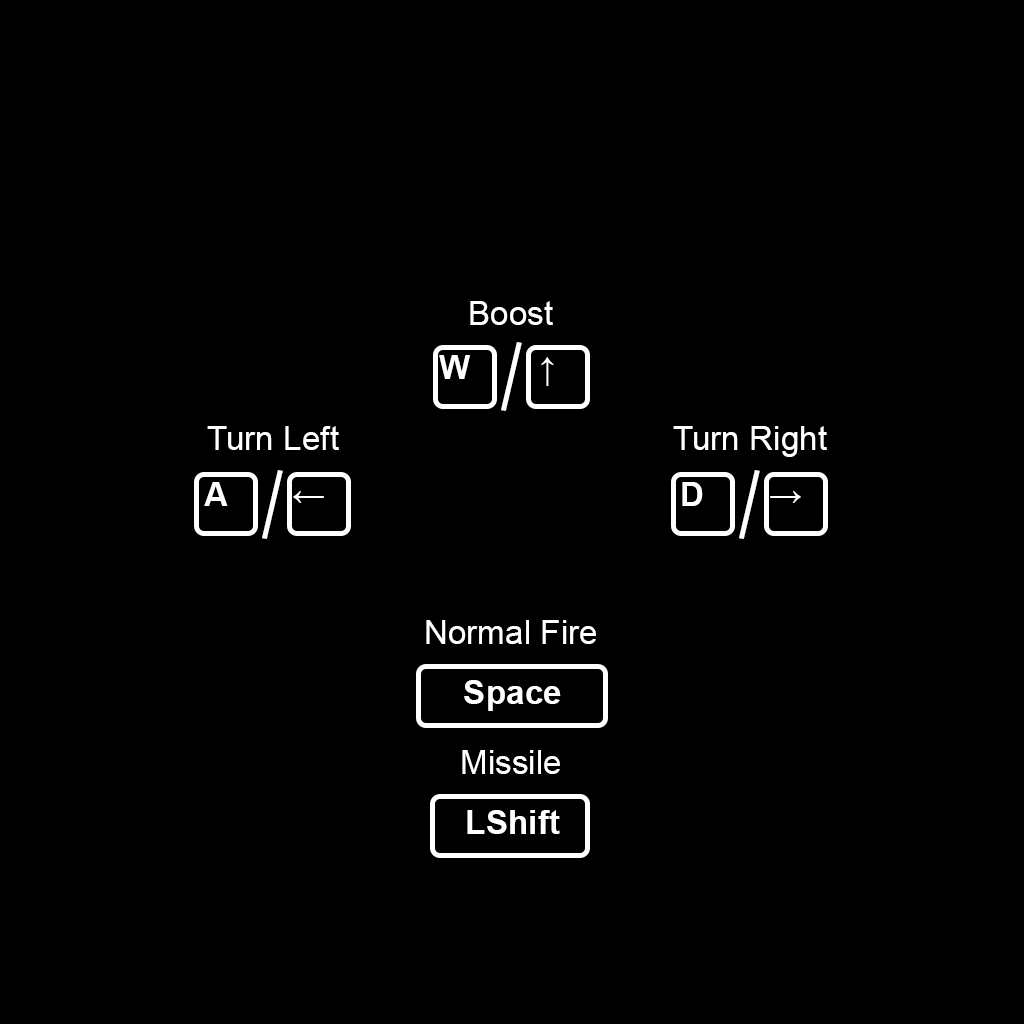
<style>
.page{position:relative;width:1024px;height:1024px;background:#000000}
.page>*{position:absolute;margin:0}
.t1{font:33.3px "ArialMT";color:#ffffff}
.t2{font:91.7px "BirchStd";color:#ffffff}
.t3{font:33.3px "Arial-BoldMT";color:#ffffff}
</style>
<div class="page">
<p class="t1" style="left:470px;top:301px;width:83px;height:24px">Boost</p>
<p class="t2" style="left:501px;top:342px;width:21px;height:69px">/</p>
<p class="t3" style="left:439px;top:355px;width:31px;height:24px">W</p>
<p class="t3" style="left:541px;top:357px;width:13px;height:29px">↑</p>
<p class="t1" style="left:207px;top:426px;width:132px;height:24px">Turn Left</p>
<p class="t1" style="left:673px;top:426px;width:154px;height:31px">Turn Right</p>
<p class="t2" style="left:262px;top:470px;width:21px;height:69px">/</p>
<p class="t2" style="left:739px;top:470px;width:21px;height:69px">/</p>
<p class="t3" style="left:204px;top:482px;width:24px;height:24px">A</p>
<p class="t3" style="left:682px;top:482px;width:21px;height:24px">D</p>
<p class="t3" style="left:293px;top:491px;width:31px;height:12px">←</p>
<p class="t3" style="left:770px;top:491px;width:31px;height:12px">→</p>
<p class="t1" style="left:426px;top:620px;width:170px;height:24px">Normal Fire</p>
<p class="t3" style="left:464px;top:680px;width:97px;height:31px">Space</p>
<p class="t1" style="left:462px;top:750px;width:98px;height:24px">Missile</p>
<p class="t3" style="left:467px;top:810px;width:93px;height:24px">LShift</p>
</div>
